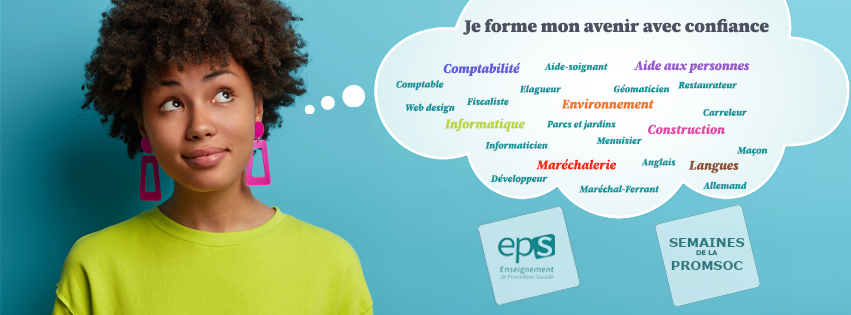
<style>
.page{position:relative;width:851px;height:315px}
.page>*{position:absolute;margin:0}
.t1{font:17.7px "SourceSerif4Roman-SmTextBlack";color:#3a4050}
.t2{font:13.3px "SourceSerif4Italic-SubheadBlackItalic";color:#615bd9}
.t3{font:10px "SourceSerif4Italic-SubheadBlackItalic";color:#16858c}
.t4{font:13.3px "SourceSerif4Italic-SubheadBlackItalic";color:#9a59cb}
.t5{font:13.3px "SourceSerif4Italic-SubheadBlackItalic";color:#ee5e19}
.t6{font:13.3px "SourceSerif4Italic-SubheadBlackItalic";color:#bbcb2c}
.t7{font:13.3px "SourceSerif4Italic-SubheadBlackItalic";color:#d33399}
.t8{font:13.3px "SourceSerif4Italic-SubheadBlackItalic";color:#f82c16}
.t9{font:13.3px "SourceSerif4Italic-SubheadBlackItalic";color:#784228}
.t10{font:12.8px "Verdana-Bold";color:#27676b}
.t11{font:6.5px "Verdana-Bold";color:#27676b}
</style>
<div class="page">
<p class="t1" style="left:463px;top:18px;width:306px;height:17px">Je forme mon avenir avec confiance</p>
<p class="t2" style="left:443px;top:62px;width:77px;height:14px">Comptabilité</p>
<p class="t3" style="left:544px;top:62px;width:64px;height:11px">Aide-soignant</p>
<p class="t4" style="left:634px;top:60px;width:116px;height:13px">Aide aux personnes</p>
<p class="t3" style="left:396px;top:80px;width:48px;height:10px">Comptable</p>
<p class="t3" style="left:519px;top:85px;width:43px;height:10px">Elagueur</p>
<p class="t3" style="left:613px;top:84px;width:57px;height:9px">Géomaticien</p>
<p class="t3" style="left:678px;top:81px;width:60px;height:8px">Restaurateur</p>
<p class="t3" style="left:467px;top:97px;width:42px;height:8px">Fiscaliste</p>
<p class="t5" style="left:561px;top:98px;width:93px;height:11px">Environnement</p>
<p class="t3" style="left:405px;top:103px;width:50px;height:11px">Web design</p>
<p class="t3" style="left:703px;top:108px;width:44px;height:8px">Carreleur</p>
<p class="t6" style="left:445px;top:118px;width:80px;height:14px">Informatique</p>
<p class="t3" style="left:547px;top:120px;width:69px;height:10px">Parcs et jardins</p>
<p class="t7" style="left:648px;top:124px;width:77px;height:11px">Construction</p>
<p class="t3" style="left:596px;top:136px;width:46px;height:9px">Menuisier</p>
<p class="t3" style="left:485px;top:141px;width:63px;height:10px">Informaticien</p>
<p class="t3" style="left:737px;top:147px;width:31px;height:9px">Maçon</p>
<p class="t8" style="left:536px;top:158px;width:81px;height:12px">Maréchalerie</p>
<p class="t3" style="left:641px;top:158px;width:35px;height:10px">Anglais</p>
<p class="t9" style="left:688px;top:160px;width:51px;height:13px">Langues</p>
<p class="t3" style="left:490px;top:174px;width:58px;height:11px">Développeur</p>
<p class="t3" style="left:579px;top:184px;width:80px;height:9px">Maréchal-Ferrant</p>
<p class="t3" style="left:703px;top:181px;width:44px;height:9px">Allemand</p>
<p class="t10" style="left:669px;top:238px;width:76px;height:32px;text-align:center">SEMAINES<br><span class="t11">DE LA<br></span>PROMSOC</p>
</div>
